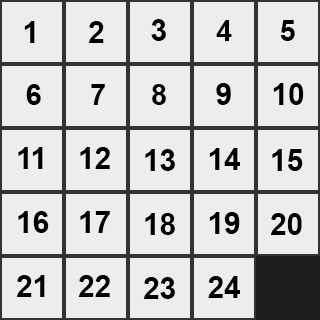
<style>
.page{position:relative;width:320px;height:320px;background:#ededed}
.page>*{position:absolute;margin:0}
.t1{font:29.5px "Arial-BoldMT";color:#000000}
.t2{font:29.4px "Arial-BoldMT";color:#000000}
</style>
<div class="page">
<p class="t1" style="left:24px;top:21px;width:11px;height:22px">1</p>
<p class="t1" style="left:88px;top:21px;width:16px;height:22px">2</p>
<p class="t1" style="left:151px;top:19px;width:15px;height:22px">3</p>
<p class="t2" style="left:216px;top:20px;width:16px;height:21px">4</p>
<p class="t1" style="left:280px;top:20px;width:15px;height:21px">5</p>
<p class="t1" style="left:26px;top:84px;width:15px;height:21px">6</p>
<p class="t2" style="left:91px;top:84px;width:14px;height:21px">7</p>
<p class="t1" style="left:152px;top:84px;width:14px;height:21px">8</p>
<p class="t1" style="left:216px;top:83px;width:15px;height:22px">9</p>
<p class="t1" style="left:273px;top:83px;width:31px;height:22px">10</p>
<p class="t1" style="left:18px;top:147px;width:25px;height:22px">11</p>
<p class="t1" style="left:80px;top:147px;width:30px;height:22px">12</p>
<p class="t1" style="left:145px;top:149px;width:30px;height:22px">13</p>
<p class="t1" style="left:209px;top:148px;width:31px;height:22px">14</p>
<p class="t1" style="left:272px;top:149px;width:31px;height:22px">15</p>
<p class="t1" style="left:18px;top:211px;width:31px;height:22px">16</p>
<p class="t1" style="left:80px;top:211px;width:30px;height:22px">17</p>
<p class="t1" style="left:145px;top:213px;width:30px;height:22px">18</p>
<p class="t1" style="left:209px;top:212px;width:31px;height:22px">19</p>
<p class="t1" style="left:270px;top:213px;width:32px;height:22px">20</p>
<p class="t1" style="left:16px;top:275px;width:29px;height:22px">21</p>
<p class="t1" style="left:78px;top:275px;width:32px;height:22px">22</p>
<p class="t1" style="left:143px;top:277px;width:32px;height:22px">23</p>
<p class="t1" style="left:208px;top:276px;width:32px;height:22px">24</p>
</div>
